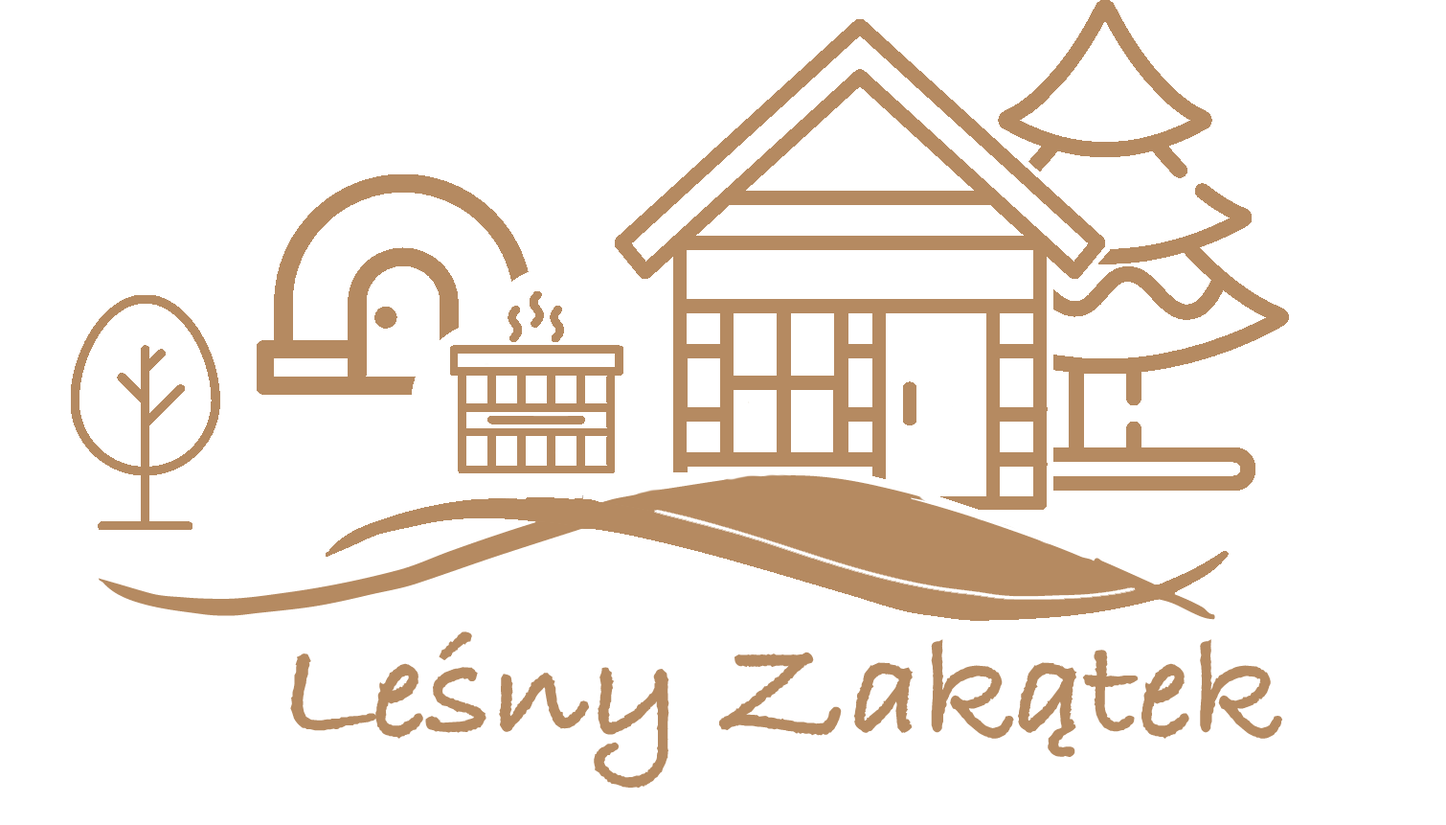
<style>
.page{position:relative;width:1446px;height:825px;background:#ffffff}
.page>*{position:absolute;margin:0}
.t1{font:143.7px "BradleyHandITCTT-Bold";color:#b58a61}
</style>
<div class="page">
<p class="t1" style="left:290px;top:631px;width:992px;height:156px">Leśny Zakątek</p>
</div>
